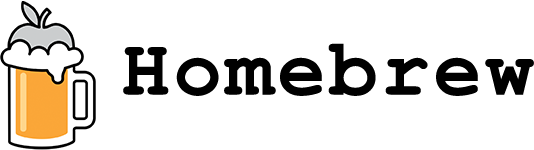
<style>
.page{position:relative;width:534px;height:150px;background:#ffffff}
.page>*{position:absolute;margin:0}
.t1{font:80px "CourierNewPS-BoldMT";letter-spacing:0.05em;color:#000000}
</style>
<div class="page">
<p class="t1" style="left:123px;top:43px;width:411px;height:53px">Homebrew</p>
</div>
